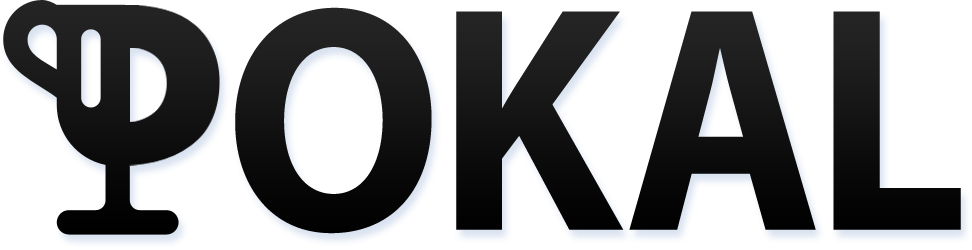
<style>
.page{position:relative;width:972px;height:250px;background:#ffffff}
.page>*{position:absolute;margin:0}
.t1{font:323.3px "MyriadPro-Bold";letter-spacing:-0.02em;color:#010101;scale:0.94 1}
</style>
<div class="page">
<p class="t1" style="left:235px;top:7px;width:726px;height:227px">OKAL</p>
</div>
